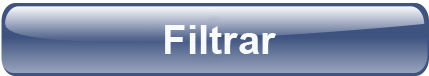
<style>
.page{position:relative;width:429px;height:76px}
.page>*{position:absolute;margin:0}
.t1{font:40px "Arial-BoldMT";color:#f8fafc}
</style>
<div class="page">
<p class="t1" style="left:165px;top:25px;width:111px;height:29px">Filtrar</p>
</div>
